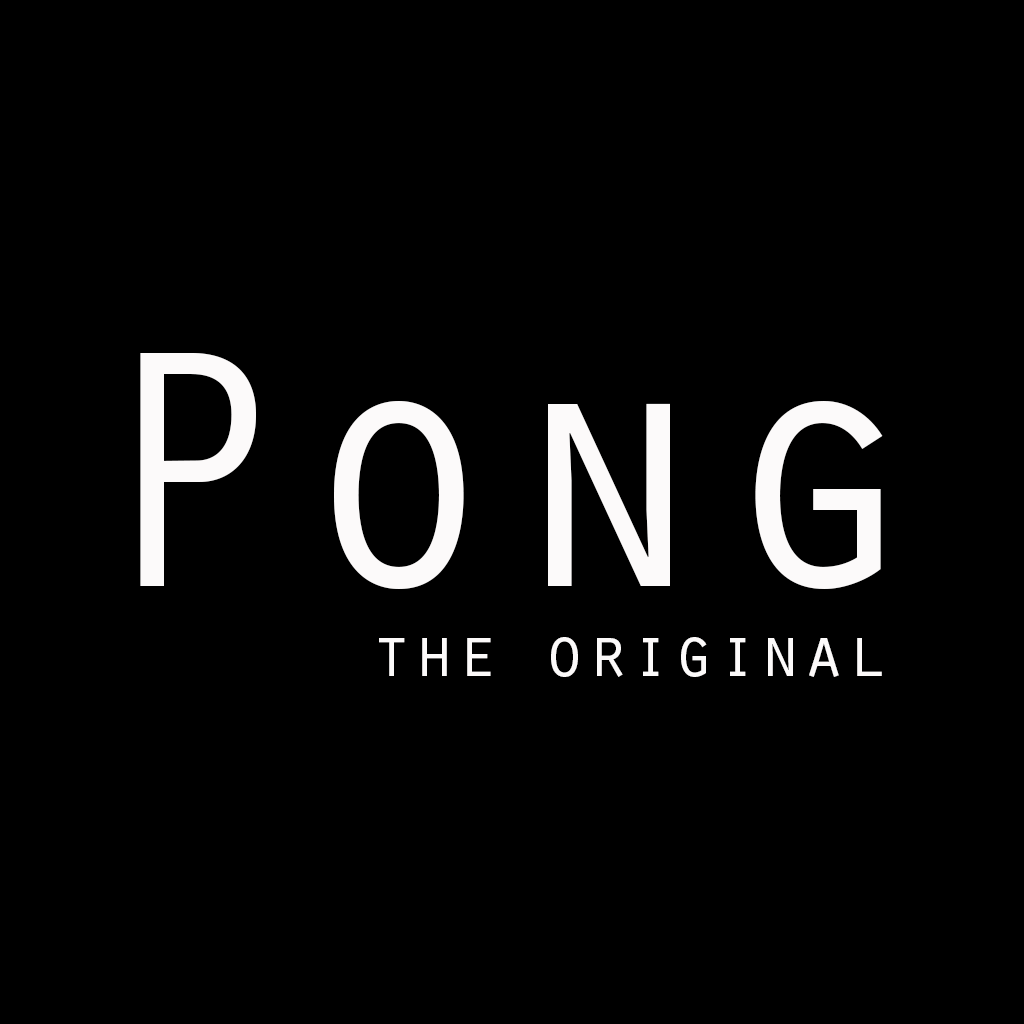
<style>
.page{position:relative;width:1024px;height:1024px;background:#000000}
.page>*{position:absolute;margin:0}
.t1{font:350px "OratorStd";color:#fcfafa}
.t2{font:72px "OratorStd";color:#fcfafa}
</style>
<div class="page">
<p class="t1" style="left:140px;top:353px;width:743px;height:236px">Pong</p>
<p class="t2" style="left:379px;top:637px;width:503px;height:40px">the original</p>
</div>
